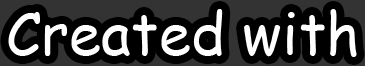
<style>
.page{position:relative;width:365px;height:66px;background:#000000}
.page>*{position:absolute;margin:0}
.t1{font:58.3px "ComicSansMS";color:#ffffff}
</style>
<div class="page">
<p class="t1" style="left:8px;top:9px;width:349px;height:48px">Created with</p>
</div>
